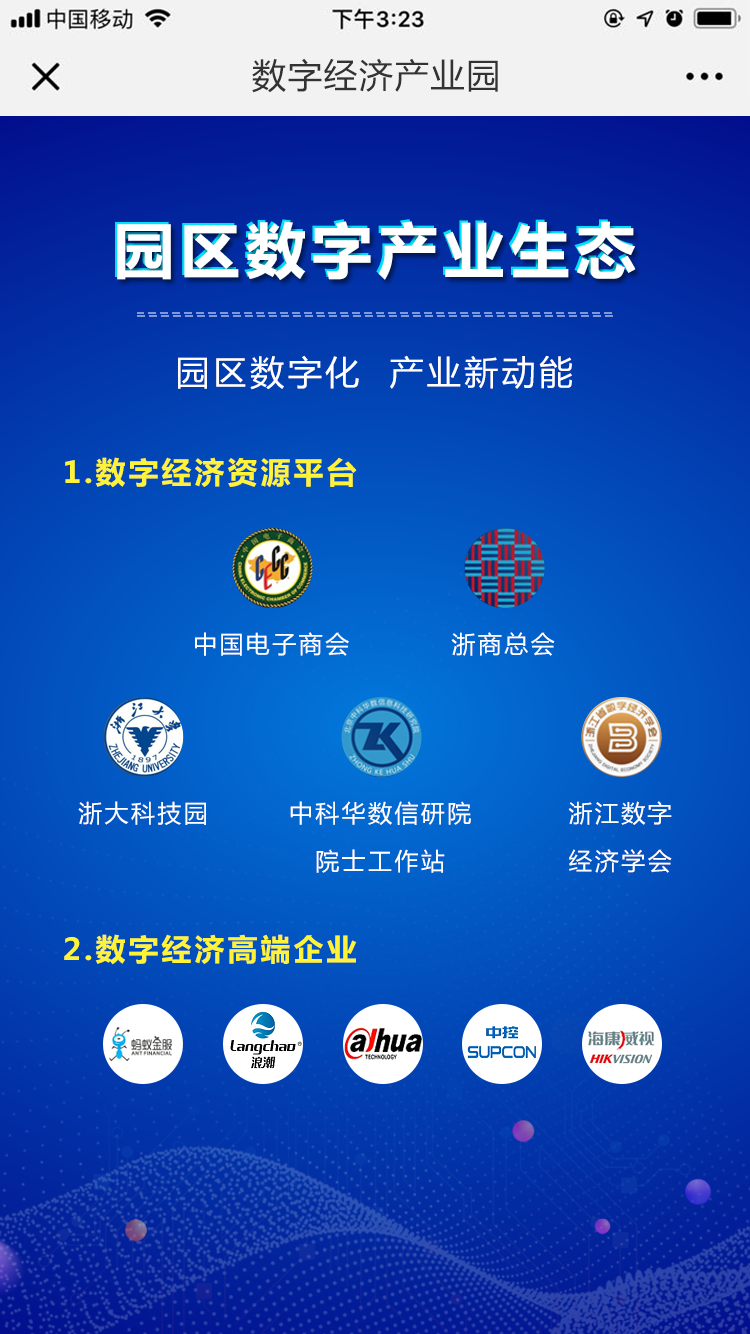
<style>
.page{position:relative;width:750px;height:1334px}
.page>*{position:absolute;margin:0}
.t1{font:34px "MicrosoftYaHei";letter-spacing:0.05em;color:#333333}
.t2{font:60px "MicrosoftYaHei-Bold";letter-spacing:0.1em;color:#ffffff}
.t3{font:34px "MicrosoftYaHei";letter-spacing:0.1em;color:#ffffff}
.t4{font:30px "MicrosoftYaHei-Bold";letter-spacing:0.1em;color:#fff337}
.t5{font:24px "MicrosoftYaHei";letter-spacing:0.1em;color:#ffffff}
.t6{font:24px/48px "MicrosoftYaHei";letter-spacing:0.1em;color:#ffffff}
</style>
<div class="page">
<p class="t1" style="left:252px;top:58px;width:246px;height:35px">数字经济产业园</p>
<p class="t2" style="left:115px;top:219px;width:518px;height:59px">园区数字产业生态</p>
<p class="t2" style="left:117px;top:221px;width:519px;height:59px">园区数字产业生态</p>
<p class="t3" style="left:178px;top:355px;width:394px;height:35px">园区数字化  产业新动能</p>
<p class="t4" style="left:65px;top:457px;width:292px;height:31px">1.数字经济资源平台</p>
<p class="t5" style="left:195px;top:632px;width:154px;height:24px">中国电子商会</p>
<p class="t5" style="left:451px;top:632px;width:104px;height:24px">浙商总会</p>
<p class="t5" style="left:78px;top:801px;width:128px;height:24px">浙大科技园</p>
<p class="t6" style="left:290px;top:801px;width:181px;height:72px;text-align:center">中科华数信研院<br>院士工作站</p>
<p class="t6" style="left:568px;top:801px;width:104px;height:72px;text-align:center">浙江数字<br>经济学会</p>
<p class="t4" style="left:64px;top:934px;width:292px;height:31px">2.数字经济高端企业</p>
</div>
